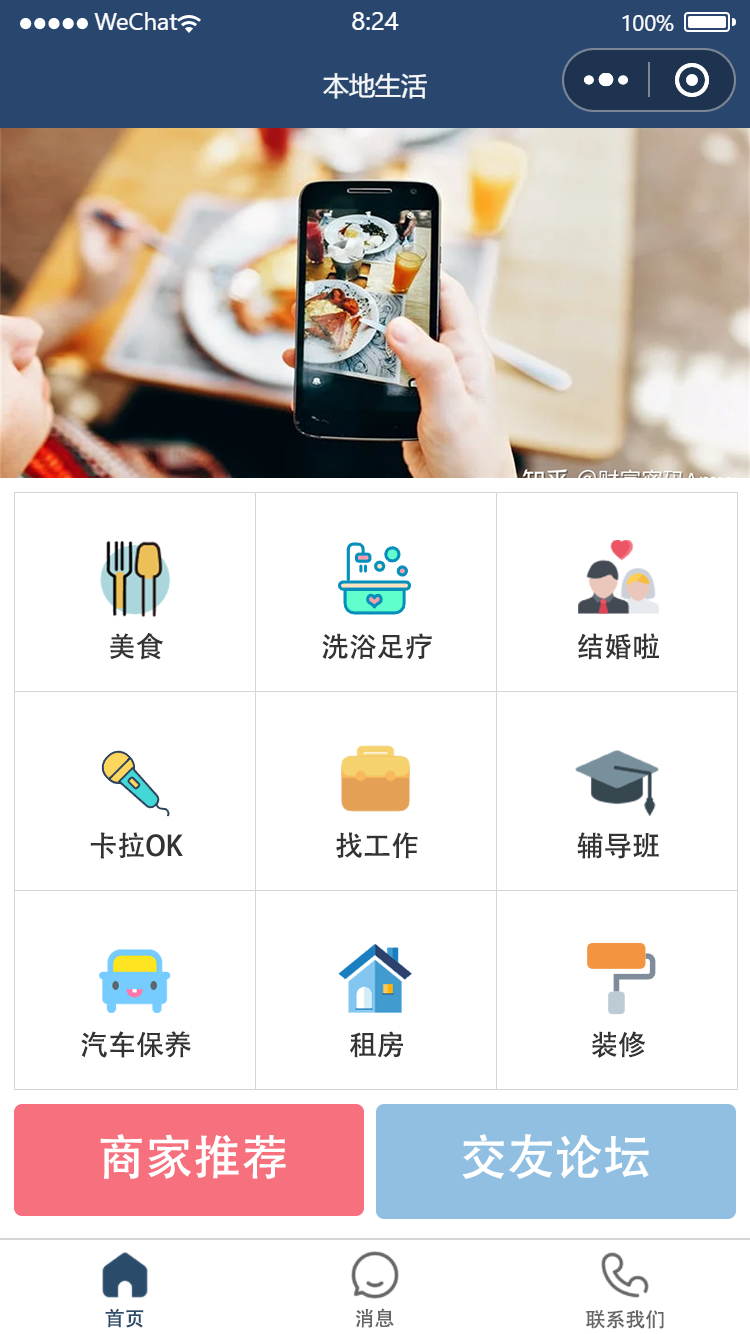
<style>
.page{position:relative;width:750px;height:1334px;background:#ffffff}
.page>*{position:absolute;margin:0}
.t1{font:28px "AdobeHeitiStd-Regular";color:#333333}
.t2{font:48px "AdobeHeitiStd-Regular";color:#ffffff}
.t3{font:20px "AdobeHeitiStd-Regular";color:#2b4b6b}
.t4{font:20px "AdobeHeitiStd-Regular";color:#666666}
</style>
<div class="page">
<p class="t1" style="left:110px;top:633px;width:53px;height:27px">美食</p>
<p class="t1" style="left:322px;top:633px;width:110px;height:27px">洗浴足疗</p>
<p class="t1" style="left:578px;top:633px;width:81px;height:27px">结婚啦</p>
<p class="t1" style="left:90px;top:832px;width:93px;height:27px">卡拉OK</p>
<p class="t1" style="left:336px;top:832px;width:82px;height:27px">找工作</p>
<p class="t1" style="left:577px;top:832px;width:82px;height:27px">辅导班</p>
<p class="t1" style="left:81px;top:1031px;width:110px;height:27px">汽车保养</p>
<p class="t1" style="left:350px;top:1031px;width:53px;height:27px">租房</p>
<p class="t1" style="left:592px;top:1031px;width:53px;height:27px">装修</p>
<p class="t2" style="left:100px;top:1134px;width:186px;height:45px">商家推荐</p>
<p class="t2" style="left:462px;top:1134px;width:187px;height:45px">交友论坛</p>
<p class="t3" style="left:105px;top:1308px;width:39px;height:20px">首页</p>
<p class="t4" style="left:356px;top:1308px;width:38px;height:20px">消息</p>
<p class="t4" style="left:586px;top:1310px;width:78px;height:19px">联系我们</p>
</div>
